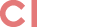
<style>
.page{position:relative;width:104px;height:28px;background:#ffffff}
.page>*{position:absolute;margin:0}
.t1{font:60px "REZ";letter-spacing:0.075em;color:#e47979}
.t2{font:60px "REZ";letter-spacing:0.075em;color:#ffffff}
</style>
<div class="page">
<p class="t1" style="left:0px;top:0px;width:104px;height:28px">ci<span class="t2">on</span></p>
</div>
